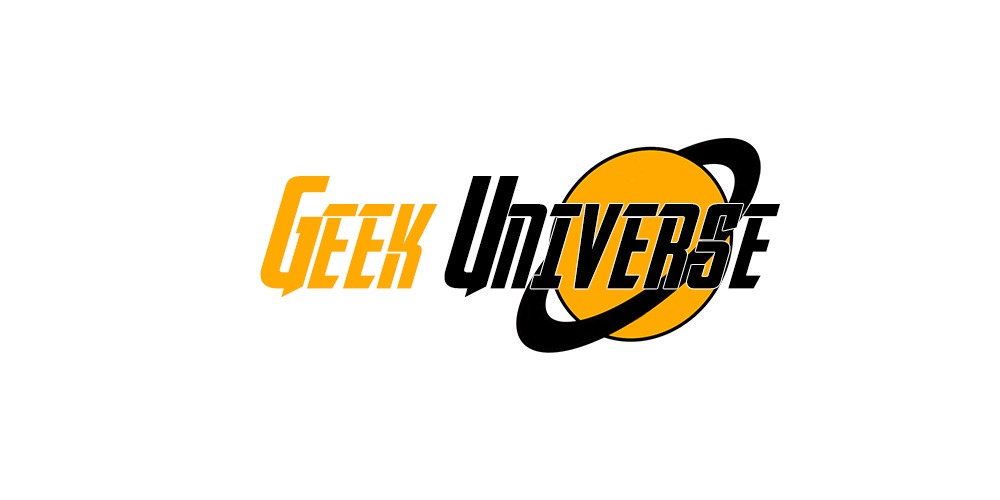
<style>
.page{position:relative;width:1000px;height:500px;background:#ffffff}
.page>*{position:absolute;margin:0}
.t1{font:108.9px "AvengeanceHeroicAvengerItalic";color:#ffaa00;text-transform:uppercase}
.t2{font:108.9px "AvengeanceHeroicAvengerItalic";color:#000000;text-transform:uppercase}
.t3{font:81.7px "AvengeanceHeroicAvengerItalic";color:#ffaa00;text-transform:uppercase}
.t4{font:81.7px "AvengeanceHeroicAvengerItalic";color:#000000;text-transform:uppercase}
</style>
<div class="page">
<p class="t1" style="left:260px;top:176px;width:70px;height:122px">G</p>
<p class="t2" style="left:444px;top:176px;width:75px;height:122px">U</p>
<p class="t3" style="left:307px;top:204px;width:131px;height:85px">eek</p>
<p class="t4" style="left:490px;top:204px;width:290px;height:85px">niverse</p>
</div>
